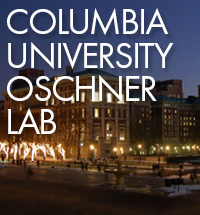
<style>
.page{position:relative;width:200px;height:215px}
.page>*{position:absolute;margin:0}
.t1{font:37.5px/33.3px "FuturaPT-Book";letter-spacing:-0.05em;color:#fefefe;text-transform:uppercase}
</style>
<div class="page">
<p class="t1" style="left:7px;top:8px;width:167px;height:126px">columbia<br>university<br>oschner<br>lab</p>
</div>
